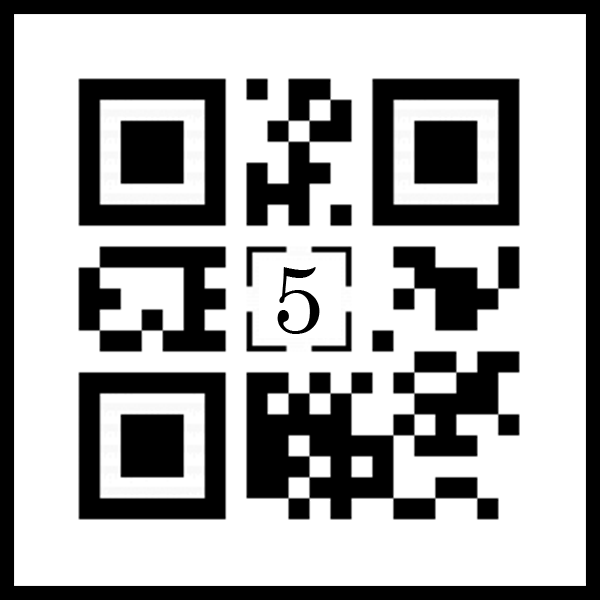
<style>
.page{position:relative;width:600px;height:600px;background:#ffffff}
.page>*{position:absolute;margin:0}
.t1{font:95.2px "Century";color:#000000}
</style>
<div class="page">
<p class="t1" style="left:277px;top:267px;width:43px;height:67px">5</p>
</div>
